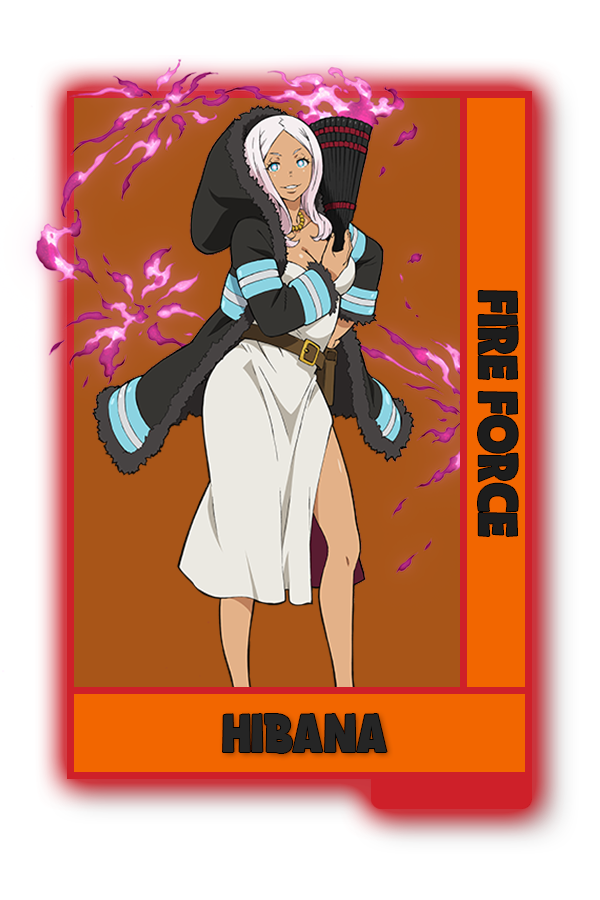
<style>
.page{position:relative;width:600px;height:900px;background:#ffffff}
.page>*{position:absolute;margin:0}
.t1{font:69.6px "AristonComicDemo-Regular";color:#1d1d1d}
.t2{font:69.1px "AristonComicDemo-Regular";color:#252525}
</style>
<div class="page">
<p class="t1" style="left:478px;top:291px;width:40px;height:245px;rotate:90deg">FIRE FORCE</p>
<p class="t2" style="left:223px;top:714px;width:164px;height:39px">HIBANA</p>
</div>
